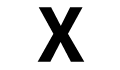
<style>
.page{position:relative;width:120px;height:70px;background:#ffffff}
.page>*{position:absolute;margin:0}
.t1{font:85px "Consolas-Bold";color:#000000}
</style>
<div class="page">
<p class="t1" style="left:37px;top:7px;width:48px;height:55px">X</p>
</div>
